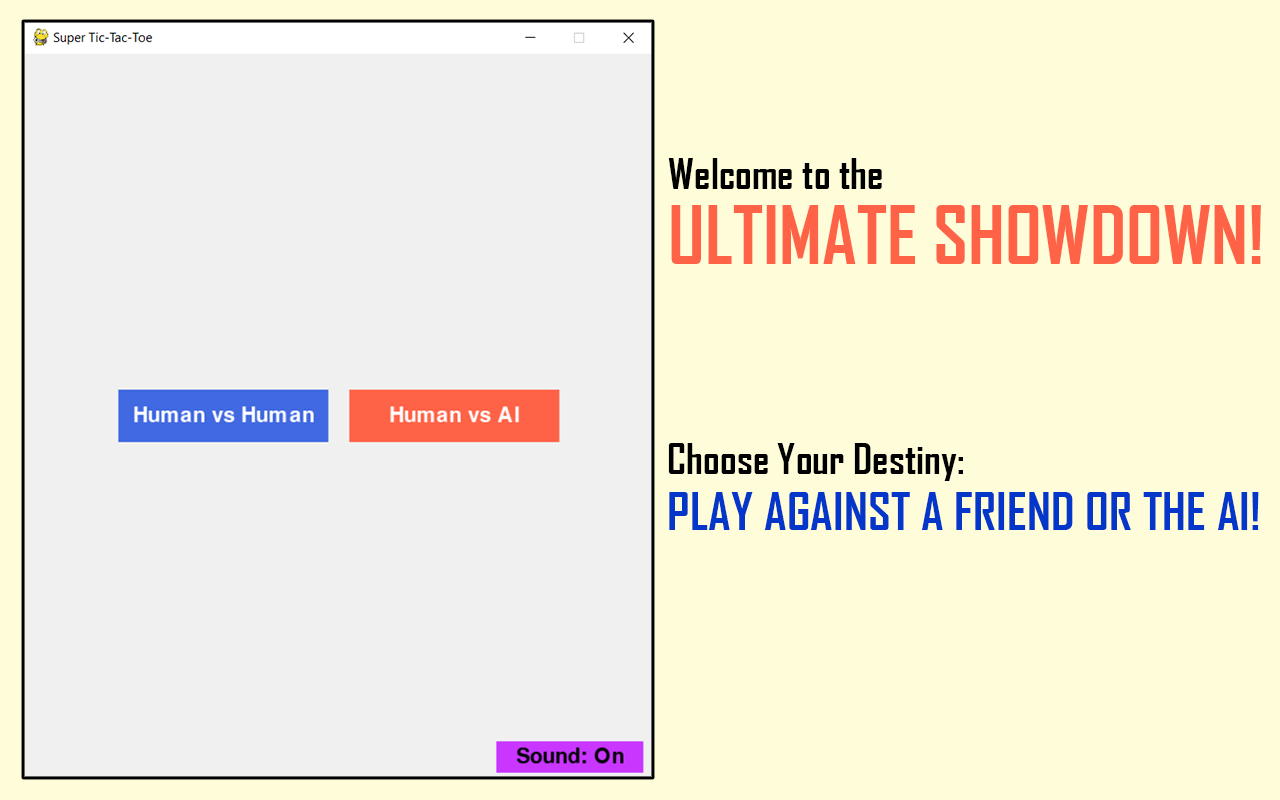
<style>
.page{position:relative;width:1280px;height:800px;background:#fffdd9}
.page>*{position:absolute;margin:0}
.t1{font:77px/75px "AdorOrjomaUnicode";color:#ff6347;text-transform:uppercase}
.t2{font:41.1px "AdorOrjomaUnicode";color:#000000}
.t3{font:50.4px "AdorOrjomaUnicode";color:#0536ca;text-transform:uppercase}
</style>
<div class="page">
<p class="t1" style="left:668px;top:158px;width:593px;height:106px"><span class="t2">Welcome to the<br></span>Ultimate Showdown!</p>
<p class="t2" style="left:668px;top:443px;width:295px;height:38px">Choose Your Destiny:</p>
<p class="t3" style="left:669px;top:492px;width:590px;height:38px">Play against a friend or the AI!</p>
</div>
